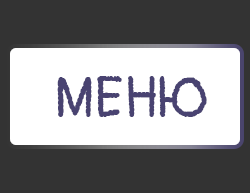
<style>
.page{position:relative;width:250px;height:193px;background:#333333}
.page>*{position:absolute;margin:0}
.t1{font:56px "Pangolin-Regular";color:#494371;text-transform:uppercase}
</style>
<div class="page">
<p class="t1" style="left:57px;top:76px;width:150px;height:41px">Меню</p>
</div>
